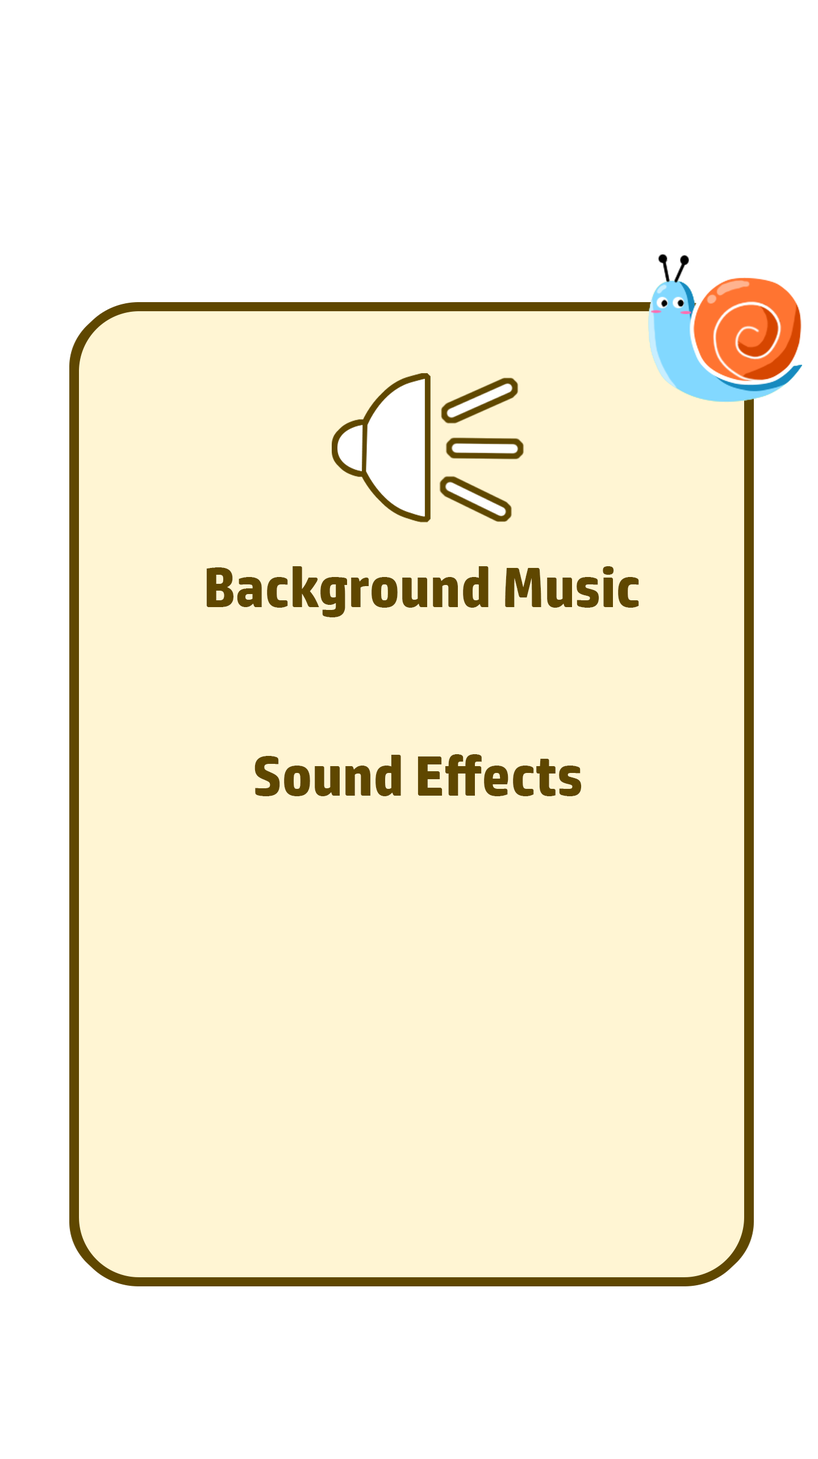
<style>
.page{position:relative;width:818px;height:1459px;background:#fff5d3}
.page>*{position:absolute;margin:0}
.t1{font:56.8px "HPSimplified-Bold";color:#5f4700}
</style>
<div class="page">
<p class="t1" style="left:206px;top:566px;width:433px;height:51px">Background Music</p>
<p class="t1" style="left:254px;top:754px;width:327px;height:42px">Sound Effects</p>
</div>
